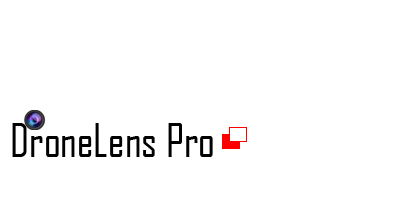
<style>
.page{position:relative;width:400px;height:200px;background:#ffffff}
.page>*{position:absolute;margin:0}
.t1{font:44px "AgencyFB-Reg";color:#000000}
</style>
<div class="page">
<p class="t1" style="left:12px;top:123px;width:201px;height:34px">DroneLens Pro</p>
</div>
